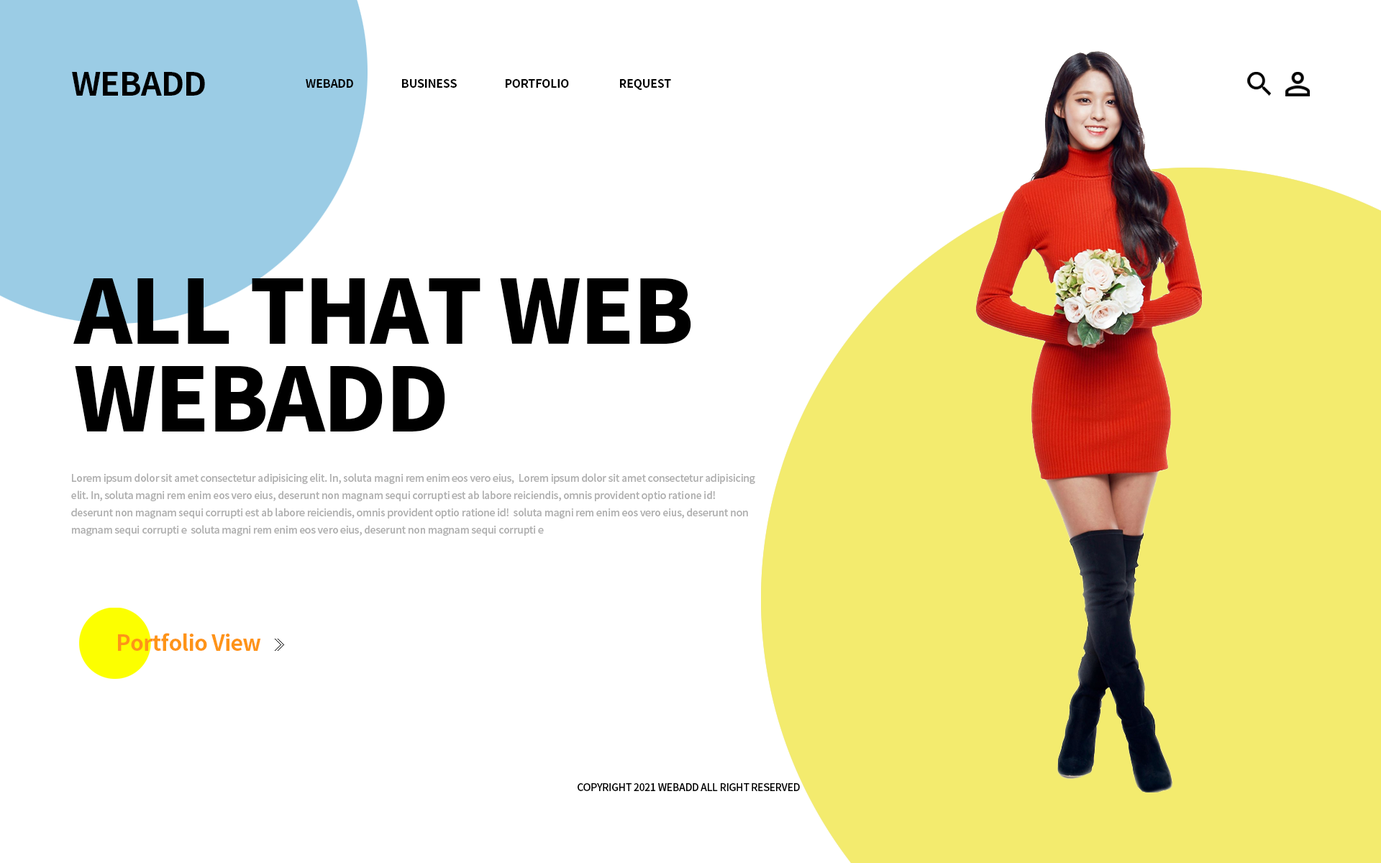
<style>
.page{position:relative;width:1381px;height:863px;background:#ffffff}
.page>*{position:absolute;margin:0}
.t1{font:32.4px "NotoSansCJKkr-Bold";letter-spacing:-0.02em;color:#000000}
.t2{font:11.5px "NotoSansCJKkr-Bold";letter-spacing:-0.02em;color:#000000}
.t3{font:87.8px/87.8px "NotoSansCJKkr-Black";letter-spacing:-0.02em;color:#000000}
.t4{font:10.1px/17.3px "NotoSansCJKkr-Medium";letter-spacing:-0.02em;color:#9f9f9f}
.t5{font:21.6px "NotoSansCJKkr-Bold";letter-spacing:-0.02em;color:#ff7e00}
.t6{font:10.1px "NotoSansCJKkr-Medium";letter-spacing:-0.02em;color:#000000}
</style>
<div class="page">
<p class="t1" style="left:72px;top:72px;width:133px;height:24px">WEBADD</p>
<p class="t2" style="left:306px;top:79px;width:365px;height:11px">WEBADD                    BUSINESS                    PORTFOLIO                     REQUEST</p>
<p class="t3" style="left:73px;top:278px;width:618px;height:154px">ALL THAT WEB<br>WEBADD</p>
<p class="t4" style="left:71px;top:473px;width:684px;height:63px">Lorem ipsum dolor sit amet consectetur adipisicing elit. In, soluta magni rem enim eos vero eius,  Lorem ipsum dolor sit amet consectetur adipisicing<br>elit. In, soluta magni rem enim eos vero eius, deserunt non magnam sequi corrupti est ab labore reiciendis, omnis provident optio ratione id!<br>deserunt non magnam sequi corrupti est ab labore reiciendis, omnis provident optio ratione id!  soluta magni rem enim eos vero eius, deserunt non magnam sequi corrupti e  soluta magni rem enim eos vero eius, deserunt non magnam sequi corrupti e</p>
<p class="t5" style="left:118px;top:633px;width:143px;height:18px">Portfolio View</p>
<p class="t6" style="left:578px;top:783px;width:222px;height:8px">COPYRIGHT 2021 WEBADD ALL RIGHT RESERVED</p>
</div>
